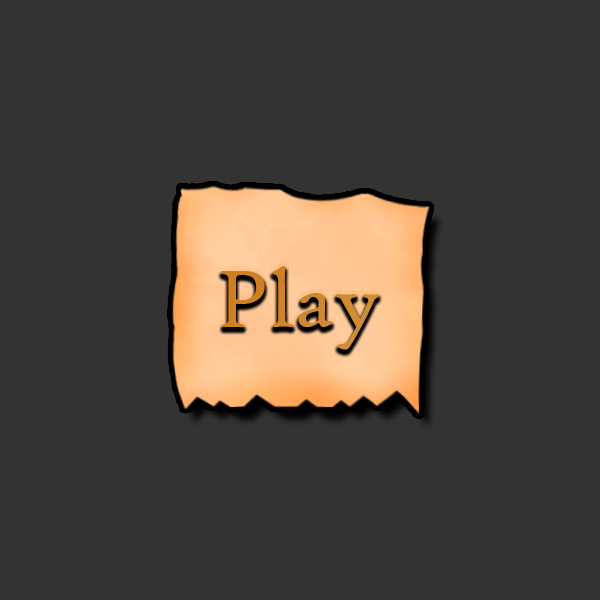
<style>
.page{position:relative;width:600px;height:600px;background:#333333}
.page>*{position:absolute;margin:0}
.t1{font:88.4px "HighTowerText-Reg";color:#cf8428}
</style>
<div class="page">
<p class="t1" style="left:221px;top:266px;width:158px;height:84px">Play</p>
</div>
